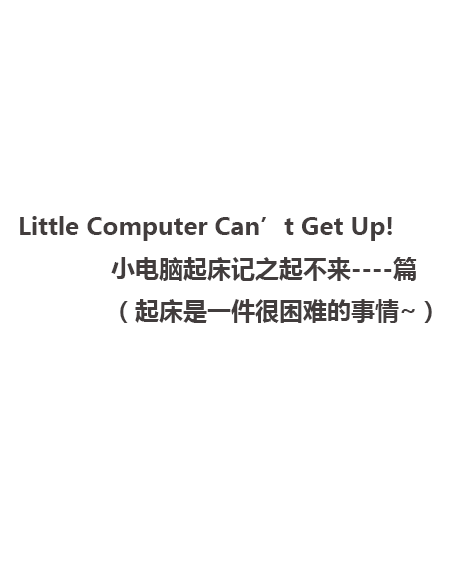
<style>
.page{position:relative;width:450px;height:562px;background:#ffffff}
.page>*{position:absolute;margin:0}
.t1{font:24px "MicrosoftYaHei-Bold";color:#423d3d}
</style>
<div class="page">
<p class="t1" style="left:20px;top:216px;width:412px;height:107px">Little Computer Can’t Get Up!<br>             小电脑起床记之起不来----篇<br>             （起床是一件很困难的事情~）</p>
</div>
